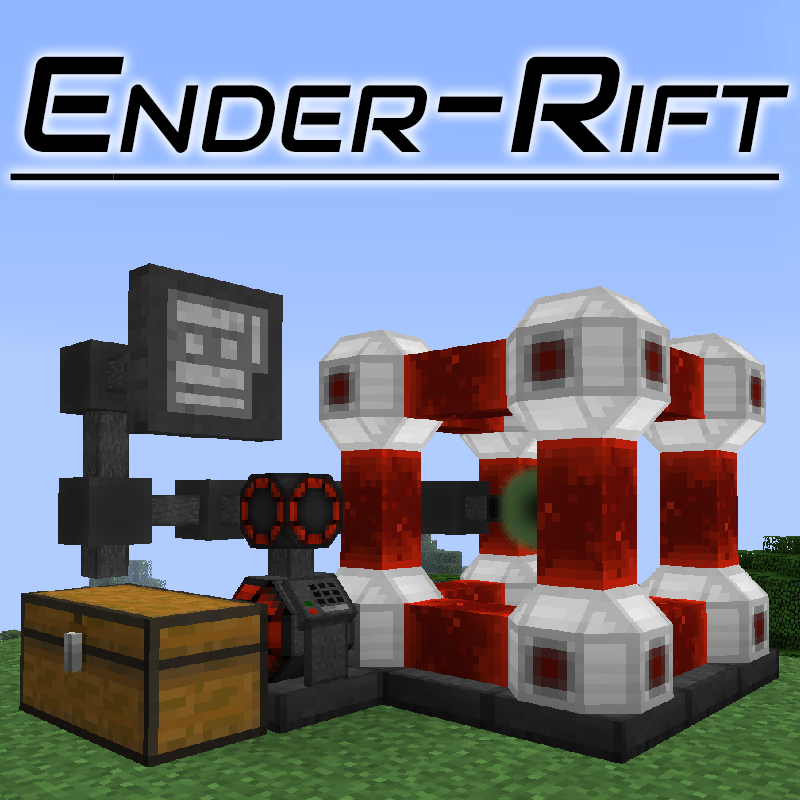
<style>
.page{position:relative;width:800px;height:800px}
.page>*{position:absolute;margin:0}
.t1{font:136px "Audiowide-Regular";color:#000000;font-variant:small-caps;font-style:italic;text-decoration:underline}
</style>
<div class="page">
<p class="t1" style="left:10px;top:56px;width:779px;height:125px">Ender-Rift</p>
</div>
